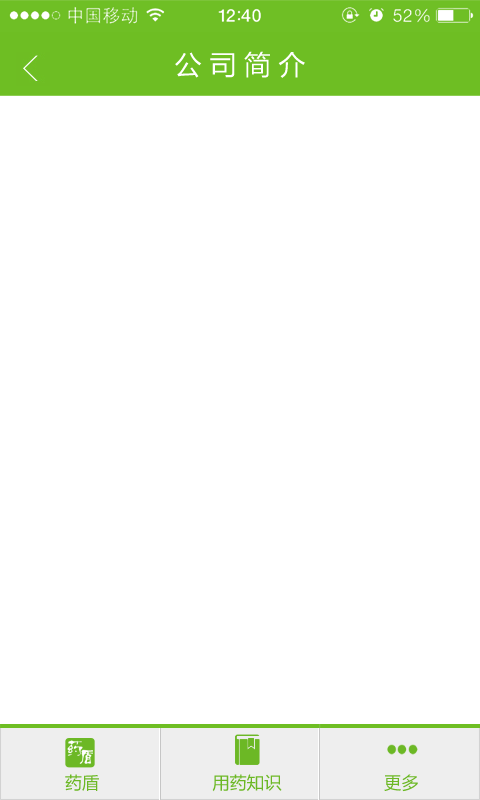
<style>
.page{position:relative;width:480px;height:800px;background:#ffffff}
.page>*{position:absolute;margin:0}
.t1{font:26.7px "MicrosoftYaHei";color:#ffffff}
.t2{font:17.3px "MicrosoftYaHei";color:#6cb825}
</style>
<div class="page">
<p class="t1" style="left:175px;top:51px;width:130px;height:27px">公 司 简 介</p>
<p class="t2" style="left:65px;top:774px;width:353px;height:18px">药盾                      用药知识                    更多</p>
</div>
